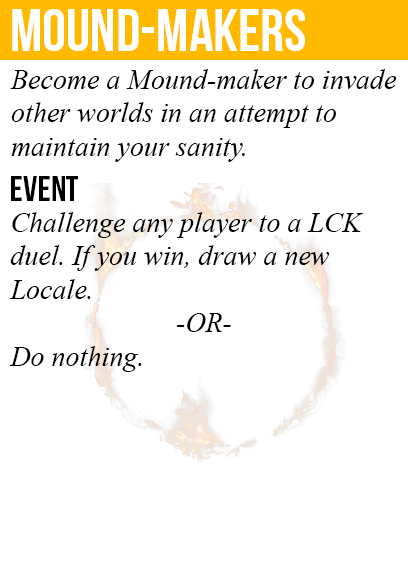
<style>
.page{position:relative;width:408px;height:585px;background:#ffffff}
.page>*{position:absolute;margin:0}
.t1{font:60px "BebasNeue";color:#ffffff}
.t2{font:28px "TimesNewRomanPS-ItalicMT";color:#000000}
.t3{font:36px "BebasNeue";color:#000000}
</style>
<div class="page">
<p class="t1" style="left:12px;top:9px;width:293px;height:42px">mound-makers</p>
<p class="t2" style="left:10px;top:69px;width:387px;height:93px">Become a Mound-maker to invade<br>other worlds in an attempt to<br>maintain your sanity.</p>
<p class="t3" style="left:11px;top:176px;width:67px;height:25px">event</p>
<p class="t2" style="left:9px;top:212px;width:354px;height:160px">Challenge any player to a LCK<br>duel. If you win, draw a new<br>Locale.<br><br>Do nothing.</p>
<p class="t2" style="left:176px;top:313px;width:55px;height:19px">-OR-</p>
</div>
